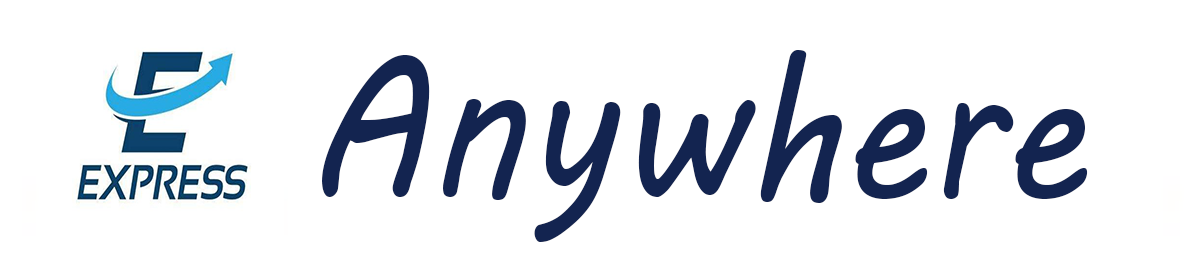
<style>
.page{position:relative;width:1189px;height:270px;background:#ffffff}
.page>*{position:absolute;margin:0}
.t1{font:201.1px "MVBoli";color:#132450;scale:0.87 1}
</style>
<div class="page">
<p class="t1" style="left:322px;top:50px;width:766px;height:192px">Anywhere</p>
</div>
